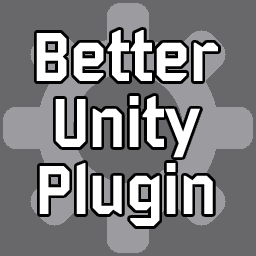
<style>
.page{position:relative;width:256px;height:256px;background:#68686b}
.page>*{position:absolute;margin:0}
.t1{font:75px/66.7px "Bombardier";color:#ffffff}
</style>
<div class="page">
<p class="t1" style="left:36px;top:30px;width:182px;height:196px;text-align:center">Better<br>Unity<br>Plugin</p>
</div>
